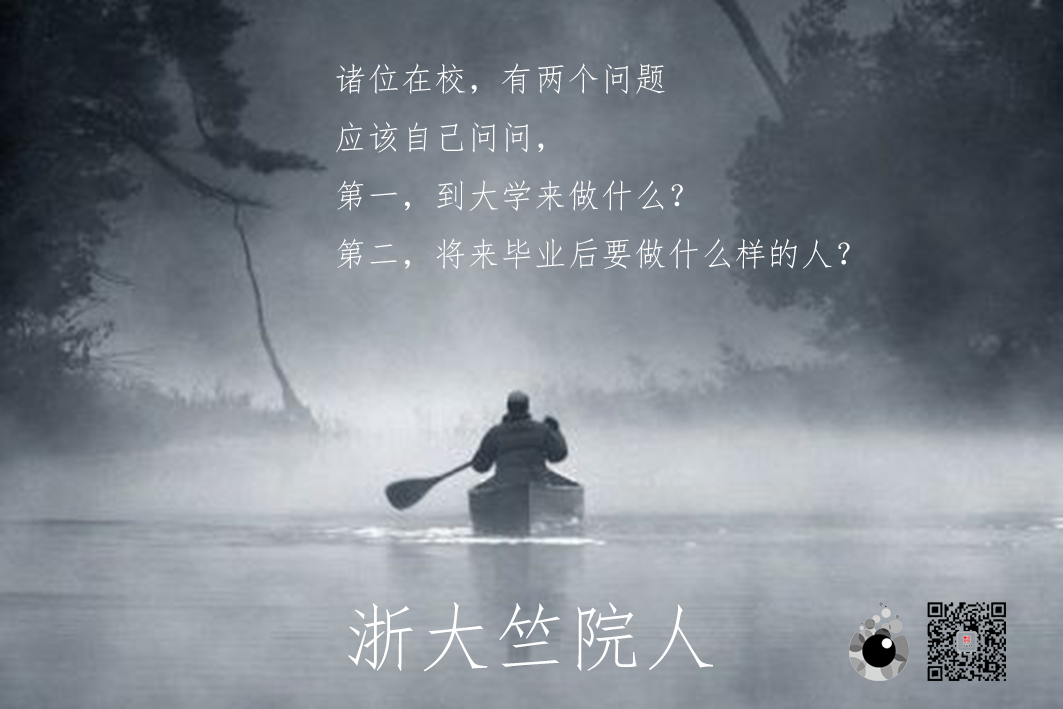
<style>
.page{position:relative;width:1063px;height:709px}
.page>*{position:absolute;margin:0}
.t1{font:33.3px/58.3px "FangSong";color:#ffffff}
.t2{font:75px "FangSong";color:#ffffff}
</style>
<div class="page">
<p class="t1" style="left:336px;top:63px;width:514px;height:206px">诸位在校，有两个问题<br>应该自己问问，<br>第一，到大学来做什么？<br>第二，将来毕业后要做什么样的人？</p>
<p class="t2" style="left:348px;top:602px;width:365px;height:70px">浙大竺院人</p>
</div>
